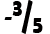
<style>
.page{position:relative;width:50px;height:34px;background:#ffffff}
.page>*{position:absolute;margin:0}
.t1{font:26.3px "BerlinSansFBDemi-Bold";color:#010000;scale:0.77 1}
.t2{font:44.6px "BerlinSansFBDemi-Bold";color:#010000;scale:0.82 1}
.t3{font:20px "BerlinSansFBDemi-Bold";color:#000000}
</style>
<div class="page">
<p class="t1" style="left:12px;top:1px;width:10px;height:15px">3</p>
<p class="t2" style="left:21px;top:0px;width:12px;height:34px">/</p>
<p class="t3" style="left:4px;top:17px;width:8px;height:3px">-</p>
<p class="t1" style="left:33px;top:18px;width:10px;height:15px">5</p>
</div>
